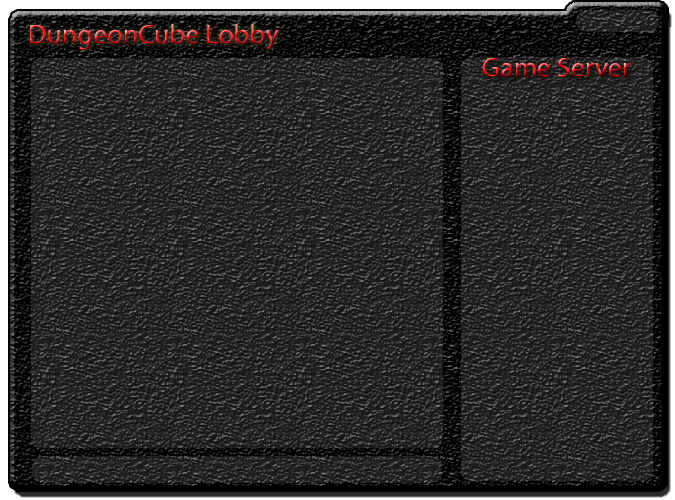
<style>
.page{position:relative;width:675px;height:500px}
.page>*{position:absolute;margin:0}
.t1{font:28px "MyriadPro-Regular"}
</style>
<div class="page">
<p class="t1" style="left:30px;top:24px;width:249px;height:26px">DungeonCube Lobby</p>
<p class="t1" style="left:483px;top:58px;width:148px;height:19px">Game Server</p>
</div>
